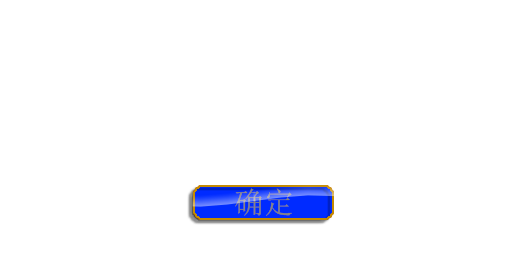
<style>
.page{position:relative;width:512px;height:256px;background:#ffffff}
.page>*{position:absolute;margin:0}
.t1{font:30px "SimSun";color:#858484}
</style>
<div class="page">
<p class="t1" style="left:235px;top:188px;width:57px;height:28px">确定</p>
</div>
